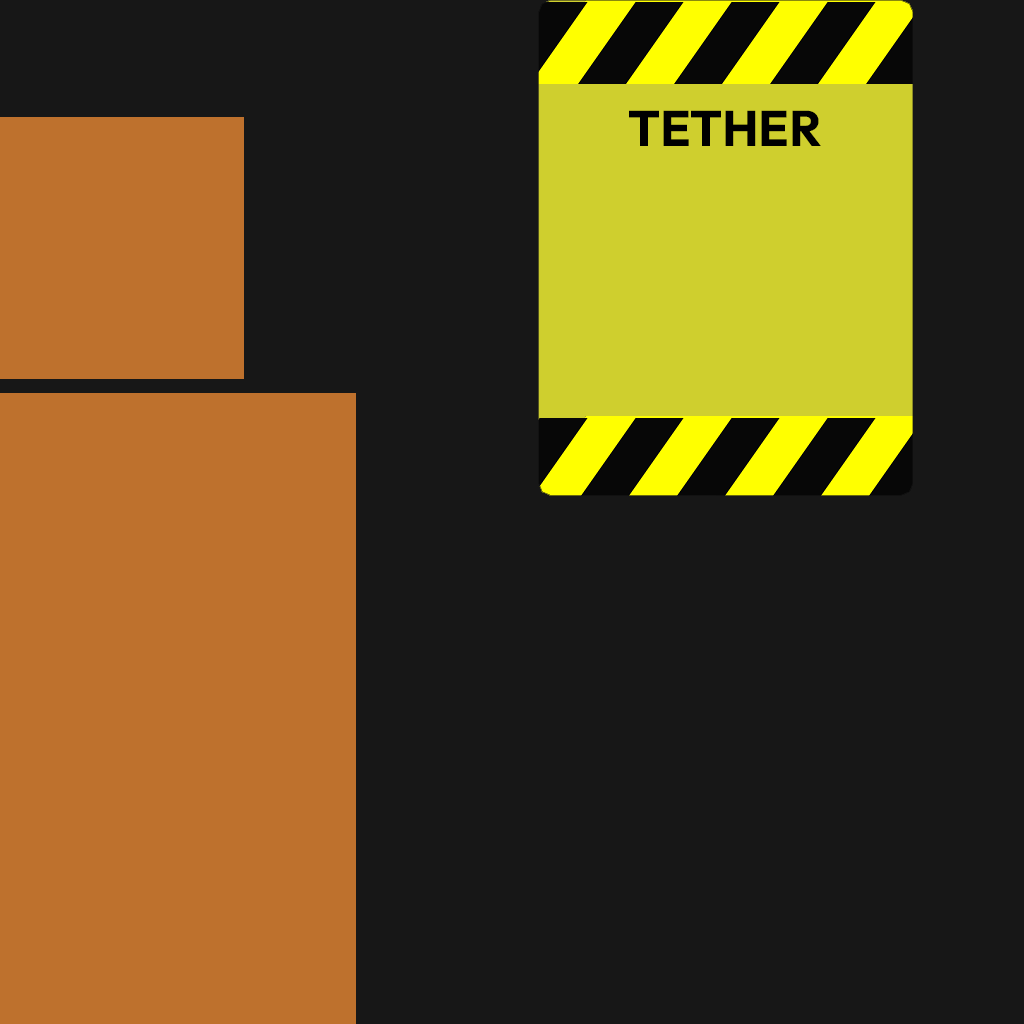
<style>
.page{position:relative;width:1024px;height:1024px;background:#171717}
.page>*{position:absolute;margin:0}
.t1{font:50px "Outfit-Bold";color:#000000}
</style>
<div class="page">
<p class="t1" style="left:629px;top:110px;width:192px;height:36px">TETHER</p>
</div>
